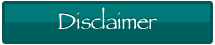
<style>
.page{position:relative;width:215px;height:45px;background:#006060}
.page>*{position:absolute;margin:0}
.t1{font:36px "ParchmentMF";color:#ffffff}
</style>
<div class="page">
<p class="t1" style="left:58px;top:7px;width:99px;height:22px">Disclaimer</p>
</div>
